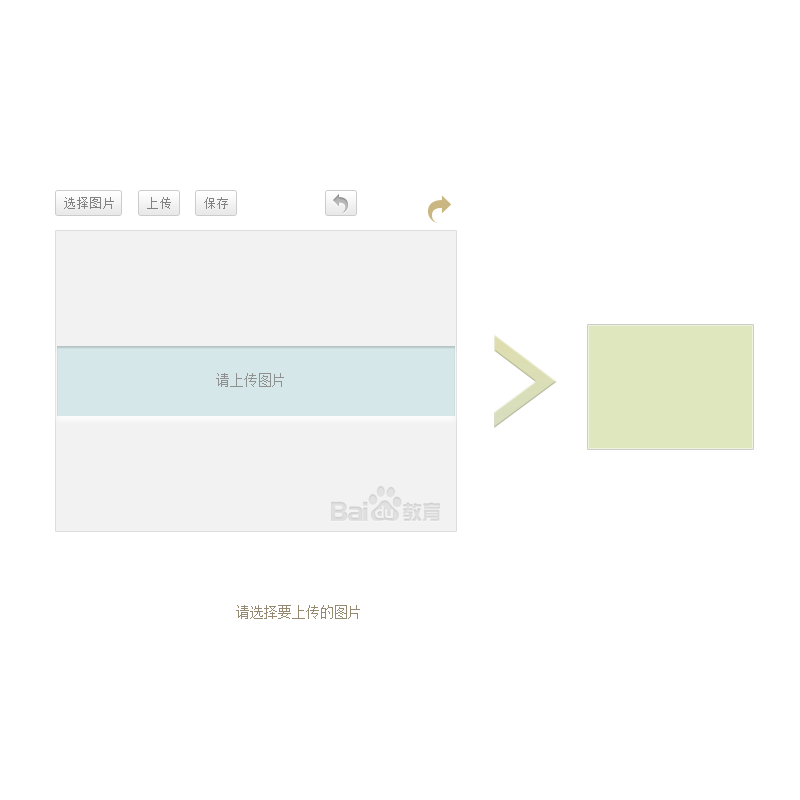
<style>
.page{position:relative;width:800px;height:800px;background:#ffffff}
.page>*{position:absolute;margin:0}
.t1{font:13px "SimSun";color:#828282}
.t2{font:14px "SimSun";color:#909090}
.t3{font:14px "SimSun";color:#958971}
</style>
<div class="page">
<p class="t1" style="left:64px;top:197px;width:50px;height:12px">选择图片</p>
<p class="t1" style="left:147px;top:197px;width:24px;height:12px">上传</p>
<p class="t1" style="left:204px;top:197px;width:24px;height:12px">保存</p>
<p class="t2" style="left:216px;top:373px;width:68px;height:14px">请上传图片</p>
<p class="t3" style="left:236px;top:605px;width:124px;height:14px">请选择要上传的图片</p>
</div>
